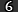
<style>
.page{position:relative;width:18px;height:12px;background:#333333}
.page>*{position:absolute;margin:0}
.t1{font:17px "Perpetua-Bold";color:#ffffff}
</style>
<div class="page">
<p class="t1" style="left:5px;top:1px;width:8px;height:10px">6</p>
</div>
